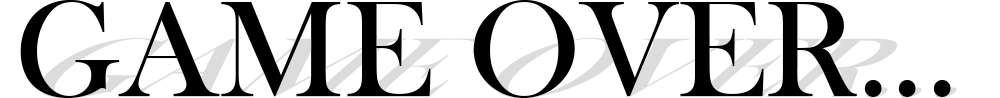
<style>
.page{position:relative;width:1000px;height:98px;background:#ffffff}
.page>*{position:absolute;margin:0}
.t1{font:141px "BaskOldFace";color:#000000}
</style>
<div class="page">
<p class="t1" style="left:20px;top:0px;width:931px;height:98px">GAME OVER...</p>
</div>
